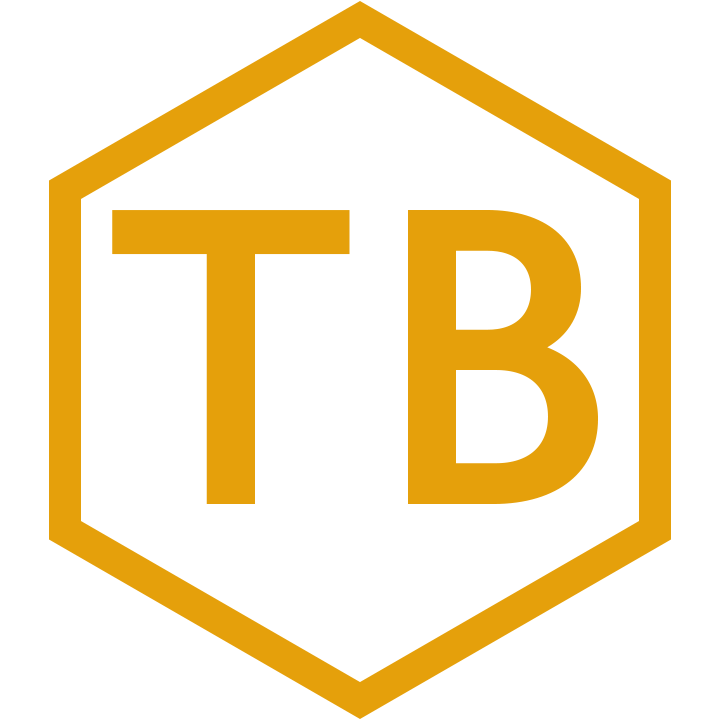
<style>
.page{position:relative;width:720px;height:720px;background:#ffffff}
.page>*{position:absolute;margin:0}
.t1{font:420px "Marianne-Medium";color:#e5a00b}
</style>
<div class="page">
<p class="t1" style="left:112px;top:210px;width:486px;height:294px">TB</p>
</div>
